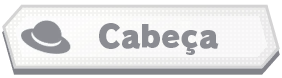
<style>
.page{position:relative;width:282px;height:78px}
.page>*{position:absolute;margin:0}
.t1{font:30.7px "RodinPro-UB";color:#8b8c92}
</style>
<div class="page">
<p class="t1" style="left:99px;top:23px;width:120px;height:32px">Cabeça</p>
</div>
